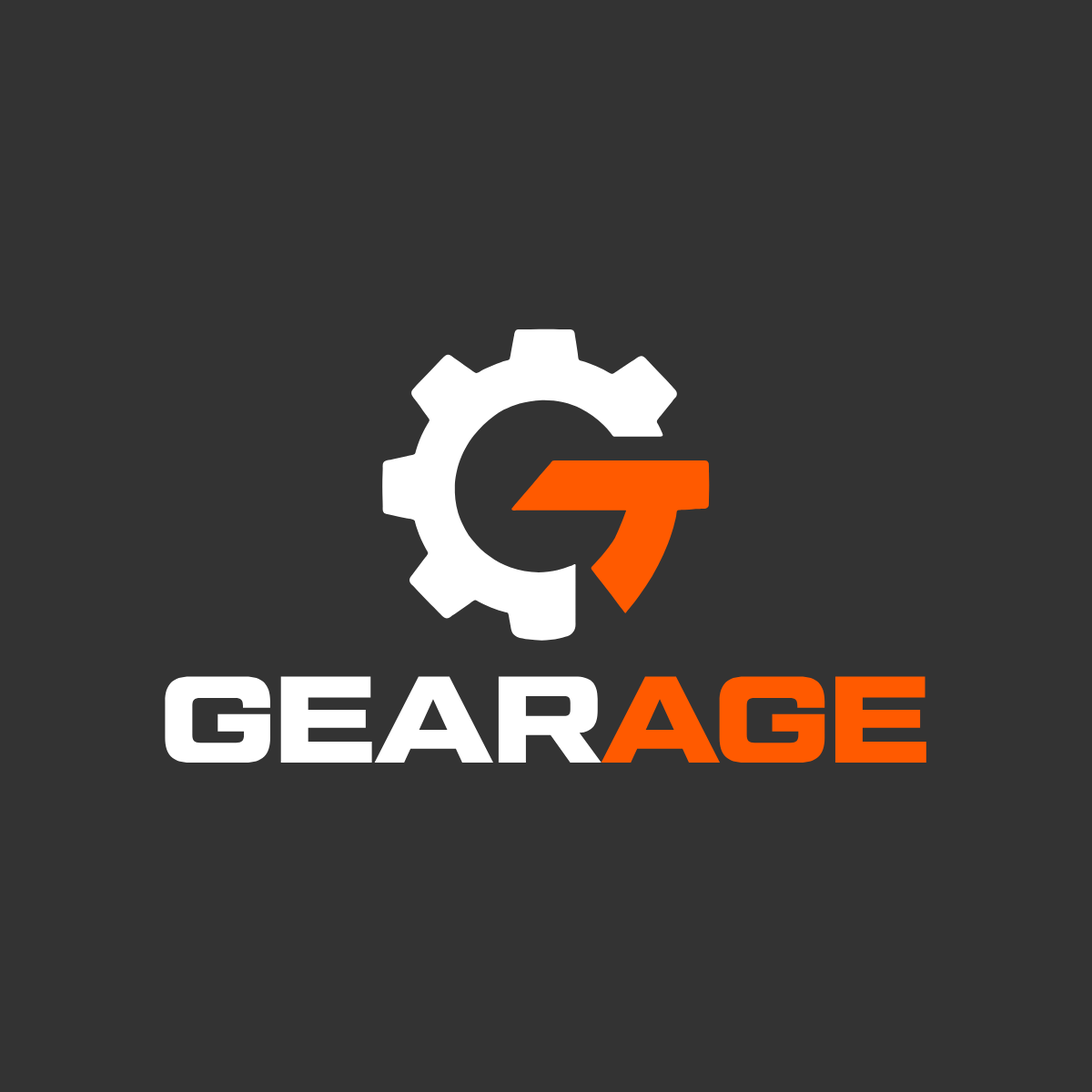
<style>
.page{position:relative;width:1092px;height:1092px;background:#333333}
.page>*{position:absolute;margin:0}
.t1{font:122.8px "FONTSPRINGDEMO-TacticSansExdBlkRegular";color:#ffffff}
.t2{font:122.8px "FONTSPRINGDEMO-TacticSansExdBlkRegular";color:#ff5a00}
</style>
<div class="page">
<p class="t1" style="left:165px;top:676px;width:761px;height:87px">GEAR<span class="t2">AGE</span></p>
</div>
